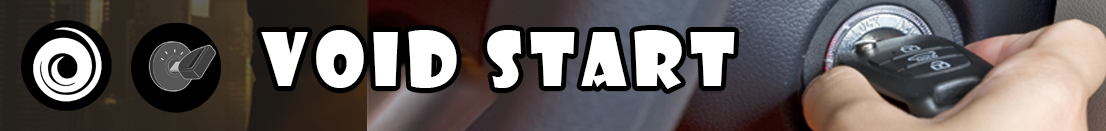
<style>
.page{position:relative;width:1106px;height:131px}
.page>*{position:absolute;margin:0}
.t1{font:72px "ShowcardGothic-Reg";letter-spacing:0.1em;color:#ffffff}
</style>
<div class="page">
<p class="t1" style="left:261px;top:30px;width:474px;height:59px">void Start</p>
</div>
